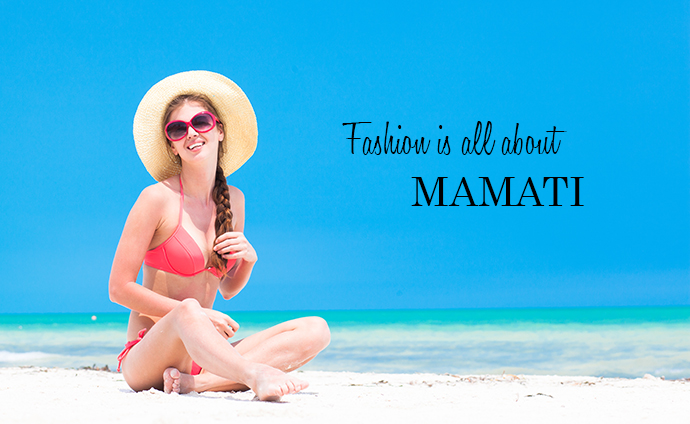
<style>
.page{position:relative;width:690px;height:424px}
.page>*{position:absolute;margin:0}
.t1{font:48px "HoneyScript-Light";color:#000000}
.t2{font:40px "Century";color:#000000}
</style>
<div class="page">
<p class="t1" style="left:342px;top:121px;width:225px;height:34px">Fashion is all about</p>
<p class="t2" style="left:411px;top:177px;width:173px;height:29px">MAMATI</p>
</div>
